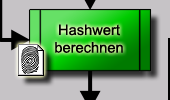
<style>
.page{position:relative;width:170px;height:100px;background:#c6c3c6}
.page>*{position:absolute;margin:0}
.t1{font:14.7px "ArialMT";color:#000000}
</style>
<div class="page">
<p class="t1" style="left:55px;top:24px;width:68px;height:29px;text-align:center">Hashwert<br>berechnen</p>
</div>
